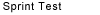
<style>
.page{position:relative;width:100px;height:15px;background:#ffffff}
.page>*{position:absolute;margin:0}
.t1{font:11px "ArialMT";letter-spacing:0.05em;color:#000000}
</style>
<div class="page">
<p class="t1" style="left:3px;top:2px;width:59px;height:11px">Sprint Test</p>
</div>
